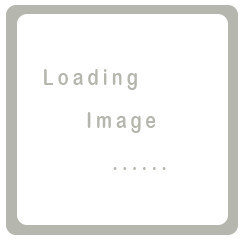
<style>
.page{position:relative;width:243px;height:239px;background:#ffffff}
.page>*{position:absolute;margin:0}
.t1{font:23px "ArialRoundedMTBold";letter-spacing:0.24em;color:#b5b6ad;scale:0.77 1}
</style>
<div class="page">
<p class="t1" style="left:44px;top:69px;width:122px;height:101px">Loading<br><br>     Image<br>  <br>        ......</p>
</div>
